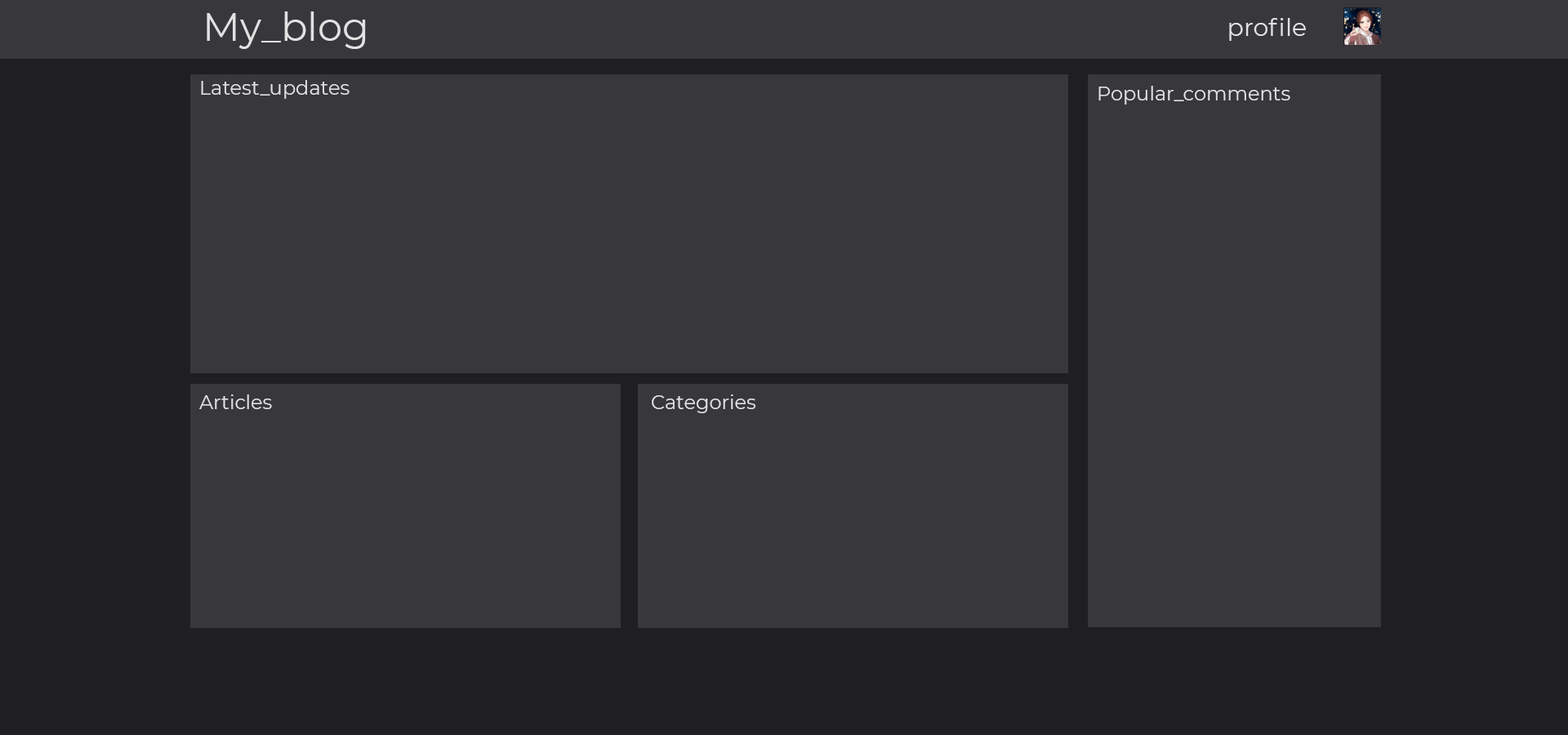
<style>
.page{position:relative;width:1568px;height:735px;background:#37373c}
.page>*{position:absolute;margin:0}
.t1{font:39.2px "Montserrat-Regular";color:#e3e1e1}
.t2{font:24.5px "Montserrat-Regular";color:#e3e1e1}
.t3{font:19.6px "Montserrat-Regular";color:#e3e1e1}
</style>
<div class="page">
<p class="t1" style="left:207px;top:11px;width:159px;height:38px">My_blog</p>
<p class="t2" style="left:1229px;top:18px;width:77px;height:23px">profile</p>
<p class="t3" style="left:201px;top:80px;width:149px;height:19px">Latest_updates</p>
<p class="t3" style="left:1098px;top:86px;width:192px;height:19px">Popular_comments</p>
<p class="t3" style="left:199px;top:394px;width:73px;height:15px">Articles</p>
<p class="t3" style="left:652px;top:394px;width:104px;height:19px">Categories</p>
</div>
